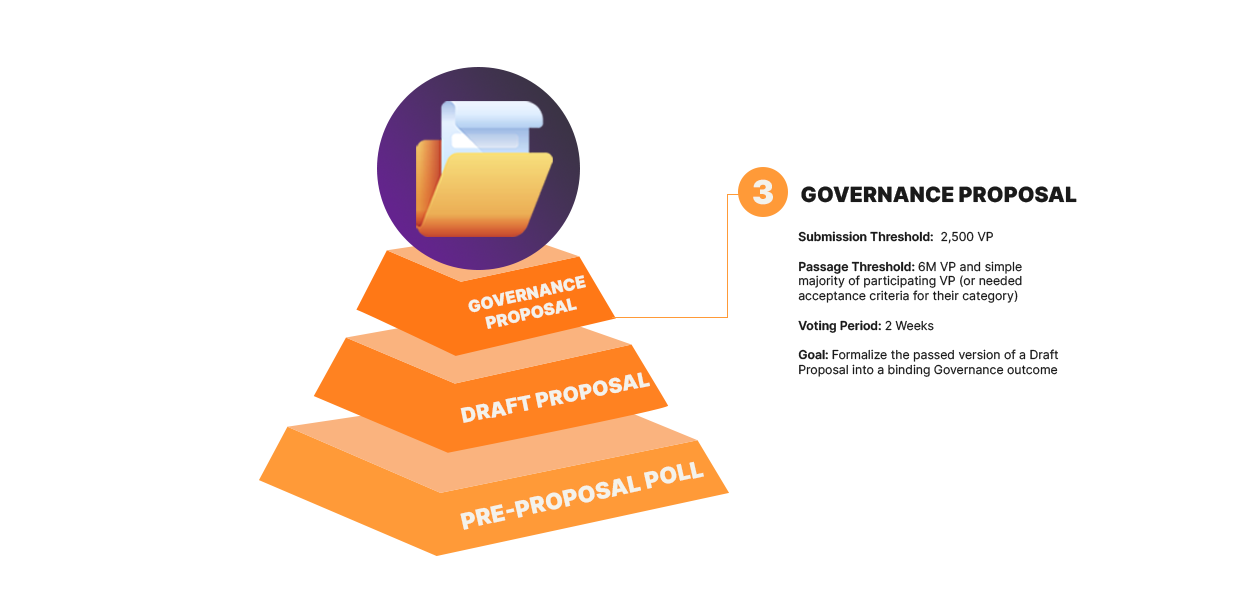
<style>
.page{position:relative;width:1240px;height:600px;background:#ffffff}
.page>*{position:absolute;margin:0}
.t1{font:33px "Inter-Black";color:#f3f2eb;text-transform:uppercase}
.t2{font:20.9px "Inter-Black";color:#1a1a1a;text-transform:uppercase}
.t3{font:12.2px "Inter-Regular";color:#1a1a1a}
.t4{font:12.2px "Inter-SemiBold";color:#1a1a1a}
.t5{font:16.3px "Inter-Black";color:#f3f2eb;text-transform:uppercase}
.t6{font:20.4px "Inter-Black";color:#f3f2eb;text-transform:uppercase}
.t7{font:22.6px "Inter-Black";color:#f3f2eb;text-transform:uppercase}
</style>
<div class="page">
<p class="t1" style="left:753px;top:179px;width:20px;height:26px">3</p>
<p class="t2" style="left:801px;top:186px;width:276px;height:17px">Governance Proposal</p>
<p class="t3" style="left:798px;top:231px;width:261px;height:146px"><span class="t4">Submission Threshold:</span>  2,500 VP<br><br><span class="t4">Passage Threshold: </span>6M VP and simple majority of participating VP (or needed acceptance criteria for their category)<br><br><span class="t4">Voting Period: </span>2 Weeks<br><br><span class="t4">Goal: </span>Formalize the passed version of a Draft Proposal into a binding Governance outcome</p>
<p class="t5" style="left:468px;top:275px;width:118px;height:54px;rotate:-13deg">Governance ProposaL</p>
<p class="t6" style="left:460px;top:372px;width:190px;height:51px;rotate:-11deg">Draft Proposal</p>
<p class="t7" style="left:460px;top:461px;width:244px;height:69px;rotate:-13deg">Pre-Proposal Poll</p>
</div>
